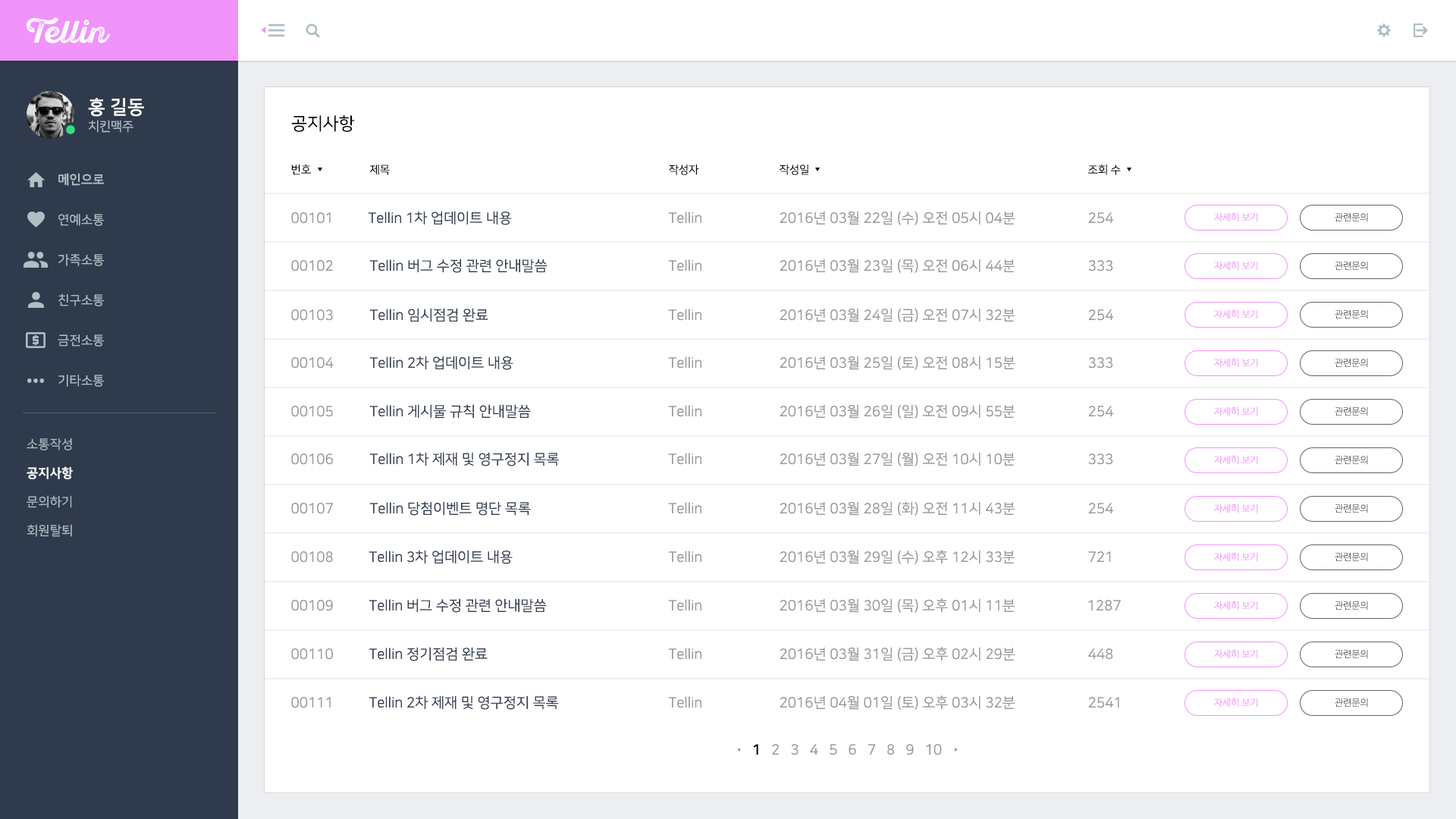
<style>
.page{position:relative;width:1456px;height:819px;background:#ffffff}
.page>*{position:absolute;margin:0}
.t1{font:19px/17.4px "NanumSquareB";color:#ffffff}
.t2{font:12.6px/17.4px "NanumSquareR";color:#b0bec5}
.t3{font:17.4px "NanumSquareR";color:#000000}
.t4{font:12.6px "NanumSquareB";letter-spacing:0.02em;color:#b0bec5}
.t5{font:11.1px "NanumSquareR";color:#000000}
.t6{font:12.6px "NanumSquareR";letter-spacing:0.02em;color:#b0bec5}
.t7{font:14.2px "NanumSquareR";color:#999999}
.t8{font:14.2px "NanumSquareR";color:#354052}
.t9{font:9.5px "NanumBarunGothicLight";color:#f093fb}
.t10{font:9.5px "NanumBarunGothicLight";color:#636363}
.t11{font:12.6px "NanumSquareEB";letter-spacing:0.02em;color:#ffffff}
.t12{font:14.2px "NanumSquareB";color:#000000}
</style>
<div class="page">
<p class="t1" style="left:88px;top:98px;width:56px;height:35px">홍 길동<br><span class="t2">치킨맥주</span></p>
<p class="t3" style="left:291px;top:115px;width:64px;height:17px">공지사항</p>
<p class="t4" style="left:58px;top:173px;width:46px;height:13px">메인으로</p>
<p class="t5" style="left:291px;top:164px;width:20px;height:11px">번호</p>
<p class="t5" style="left:369px;top:165px;width:21px;height:10px">제목</p>
<p class="t5" style="left:669px;top:165px;width:30px;height:10px">작성자</p>
<p class="t5" style="left:780px;top:165px;width:28px;height:10px">작성일</p>
<p class="t5" style="left:1088px;top:164px;width:33px;height:11px">조회 수</p>
<p class="t6" style="left:58px;top:214px;width:46px;height:12px">연예소통</p>
<p class="t7" style="left:291px;top:212px;width:40px;height:12px">00101</p>
<p class="t8" style="left:368px;top:211px;width:144px;height:14px">Tellin 1차 업데이트 내용</p>
<p class="t7" style="left:668px;top:212px;width:33px;height:12px">Tellin</p>
<p class="t7" style="left:780px;top:211px;width:235px;height:14px">2016년 03월 22일 (수) 오전 05시 04분</p>
<p class="t7" style="left:1088px;top:212px;width:25px;height:12px">254</p>
<p class="t9" style="left:1214px;top:212px;width:44px;height:10px">자세히 보기</p>
<p class="t10" style="left:1335px;top:212px;width:33px;height:10px">관련문의</p>
<p class="t6" style="left:58px;top:254px;width:46px;height:12px">가족소통</p>
<p class="t7" style="left:291px;top:260px;width:42px;height:11px">00102</p>
<p class="t8" style="left:369px;top:259px;width:179px;height:14px">Tellin 버그 수정 관련 안내말씀</p>
<p class="t7" style="left:668px;top:259px;width:33px;height:12px">Tellin</p>
<p class="t7" style="left:780px;top:259px;width:235px;height:14px">2016년 03월 23일 (목) 오전 06시 44분</p>
<p class="t7" style="left:1088px;top:260px;width:25px;height:11px">333</p>
<p class="t9" style="left:1214px;top:261px;width:44px;height:10px">자세히 보기</p>
<p class="t10" style="left:1335px;top:261px;width:33px;height:10px">관련문의</p>
<p class="t6" style="left:58px;top:293px;width:46px;height:13px">친구소통</p>
<p class="t7" style="left:291px;top:309px;width:42px;height:12px">00103</p>
<p class="t8" style="left:369px;top:308px;width:119px;height:14px">Tellin 임시점검 완료</p>
<p class="t7" style="left:668px;top:309px;width:33px;height:12px">Tellin</p>
<p class="t7" style="left:780px;top:308px;width:235px;height:14px">2016년 03월 24일 (금) 오전 07시 32분</p>
<p class="t7" style="left:1088px;top:309px;width:25px;height:12px">254</p>
<p class="t9" style="left:1214px;top:309px;width:44px;height:10px">자세히 보기</p>
<p class="t10" style="left:1335px;top:309px;width:33px;height:10px">관련문의</p>
<p class="t6" style="left:58px;top:334px;width:46px;height:13px">금전소통</p>
<p class="t7" style="left:291px;top:357px;width:43px;height:12px">00104</p>
<p class="t8" style="left:369px;top:356px;width:144px;height:14px">Tellin 2차 업데이트 내용</p>
<p class="t7" style="left:668px;top:356px;width:33px;height:13px">Tellin</p>
<p class="t7" style="left:780px;top:356px;width:235px;height:14px">2016년 03월 25일 (토) 오전 08시 15분</p>
<p class="t7" style="left:1088px;top:357px;width:25px;height:12px">333</p>
<p class="t9" style="left:1214px;top:358px;width:44px;height:10px">자세히 보기</p>
<p class="t10" style="left:1335px;top:358px;width:33px;height:10px">관련문의</p>
<p class="t6" style="left:58px;top:375px;width:46px;height:12px">기타소통</p>
<p class="t7" style="left:291px;top:406px;width:42px;height:11px">00105</p>
<p class="t8" style="left:369px;top:404px;width:162px;height:15px">Tellin 게시물 규칙 안내말씀</p>
<p class="t7" style="left:668px;top:405px;width:33px;height:12px">Tellin</p>
<p class="t7" style="left:780px;top:404px;width:235px;height:15px">2016년 03월 26일 (일) 오전 09시 55분</p>
<p class="t7" style="left:1088px;top:406px;width:25px;height:11px">254</p>
<p class="t9" style="left:1214px;top:406px;width:44px;height:10px">자세히 보기</p>
<p class="t10" style="left:1335px;top:406px;width:33px;height:10px">관련문의</p>
<p class="t6" style="left:27px;top:438px;width:45px;height:12px">소통작성</p>
<p class="t7" style="left:291px;top:453px;width:42px;height:12px">00106</p>
<p class="t8" style="left:369px;top:452px;width:190px;height:14px">Tellin 1차 제재 및 영구정지 목록</p>
<p class="t7" style="left:668px;top:453px;width:33px;height:12px">Tellin</p>
<p class="t7" style="left:780px;top:452px;width:235px;height:14px">2016년 03월 27일 (월) 오전 10시 10분</p>
<p class="t7" style="left:1088px;top:453px;width:25px;height:12px">333</p>
<p class="t9" style="left:1214px;top:455px;width:44px;height:10px">자세히 보기</p>
<p class="t10" style="left:1335px;top:455px;width:33px;height:10px">관련문의</p>
<p class="t11" style="left:27px;top:466px;width:46px;height:13px">공지사항</p>
<p class="t6" style="left:27px;top:495px;width:45px;height:13px">문의하기</p>
<p class="t7" style="left:291px;top:503px;width:42px;height:11px">00107</p>
<p class="t8" style="left:369px;top:501px;width:162px;height:15px">Tellin 당첨이벤트 명단 목록</p>
<p class="t7" style="left:668px;top:502px;width:33px;height:12px">Tellin</p>
<p class="t7" style="left:780px;top:501px;width:235px;height:15px">2016년 03월 28일 (화) 오전 11시 43분</p>
<p class="t7" style="left:1088px;top:503px;width:25px;height:11px">254</p>
<p class="t9" style="left:1214px;top:504px;width:44px;height:9px">자세히 보기</p>
<p class="t10" style="left:1335px;top:504px;width:33px;height:9px">관련문의</p>
<p class="t6" style="left:27px;top:524px;width:45px;height:13px">회원탈퇴</p>
<p class="t7" style="left:291px;top:551px;width:42px;height:12px">00108</p>
<p class="t8" style="left:369px;top:550px;width:144px;height:14px">Tellin 3차 업데이트 내용</p>
<p class="t7" style="left:668px;top:551px;width:33px;height:12px">Tellin</p>
<p class="t7" style="left:780px;top:550px;width:235px;height:14px">2016년 03월 29일 (수) 오후 12시 33분</p>
<p class="t7" style="left:1088px;top:551px;width:23px;height:11px">721</p>
<p class="t9" style="left:1214px;top:552px;width:44px;height:10px">자세히 보기</p>
<p class="t10" style="left:1335px;top:552px;width:33px;height:10px">관련문의</p>
<p class="t7" style="left:291px;top:600px;width:42px;height:11px">00109</p>
<p class="t8" style="left:369px;top:598px;width:178px;height:15px">Tellin 버그 수정 관련 안내말씀</p>
<p class="t7" style="left:668px;top:599px;width:33px;height:12px">Tellin</p>
<p class="t7" style="left:780px;top:598px;width:235px;height:15px">2016년 03월 30일 (목) 오후 01시 11분</p>
<p class="t7" style="left:1088px;top:600px;width:33px;height:11px">1287</p>
<p class="t9" style="left:1214px;top:601px;width:44px;height:9px">자세히 보기</p>
<p class="t10" style="left:1335px;top:601px;width:33px;height:9px">관련문의</p>
<p class="t7" style="left:291px;top:648px;width:42px;height:12px">00110</p>
<p class="t8" style="left:369px;top:647px;width:119px;height:14px">Tellin 정기점검 완료</p>
<p class="t7" style="left:668px;top:648px;width:33px;height:12px">Tellin</p>
<p class="t7" style="left:780px;top:647px;width:235px;height:14px">2016년 03월 31일 (금) 오후 02시 29분</p>
<p class="t7" style="left:1088px;top:648px;width:25px;height:12px">448</p>
<p class="t9" style="left:1214px;top:649px;width:44px;height:10px">자세히 보기</p>
<p class="t10" style="left:1335px;top:649px;width:33px;height:10px">관련문의</p>
<p class="t7" style="left:291px;top:697px;width:40px;height:11px">00111</p>
<p class="t8" style="left:369px;top:695px;width:189px;height:15px">Tellin 2차 제재 및 영구정지 목록</p>
<p class="t7" style="left:668px;top:696px;width:33px;height:12px">Tellin</p>
<p class="t7" style="left:780px;top:695px;width:235px;height:15px">2016년 04월 01일 (토) 오후 03시 32분</p>
<p class="t7" style="left:1088px;top:697px;width:31px;height:11px">2541</p>
<p class="t9" style="left:1214px;top:698px;width:44px;height:10px">자세히 보기</p>
<p class="t10" style="left:1335px;top:698px;width:33px;height:10px">관련문의</p>
<p class="t7" style="left:753px;top:744px;width:189px;height:11px"><span class="t12">1</span>   2   3   4   5   6   7   8   9   10</p>
</div>
